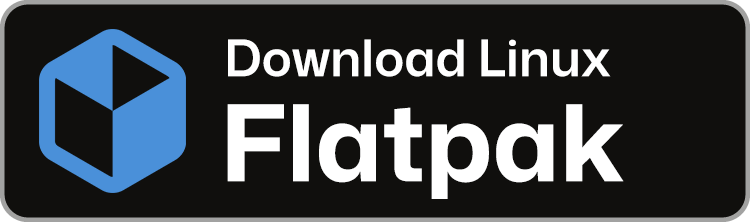
<style>
.page{position:relative;width:750px;height:222px;background:#100f0d}
.page>*{position:absolute;margin:0}
.t1{font:49.9px "MonaSans-SemiBold";color:#ffffff}
.t2{font:105.6px "MonaSans-Bold";color:#ffffff}
</style>
<div class="page">
<p class="t1" style="left:228px;top:39px;width:383px;height:38px">Download Linux</p>
<p class="t2" style="left:227px;top:104px;width:397px;height:95px">Flatpak</p>
</div>
